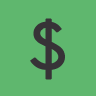
<style>
.page{position:relative;width:96px;height:96px;background:#5fb76e}
.page>*{position:absolute;margin:0}
.t1{font:63px "CenturyGothic";letter-spacing:0.01em;color:#373337;font-weight:bold;scale:1.06 1}
</style>
<div class="page">
<p class="t1" style="left:30px;top:18px;width:35px;height:62px">$</p>
</div>
